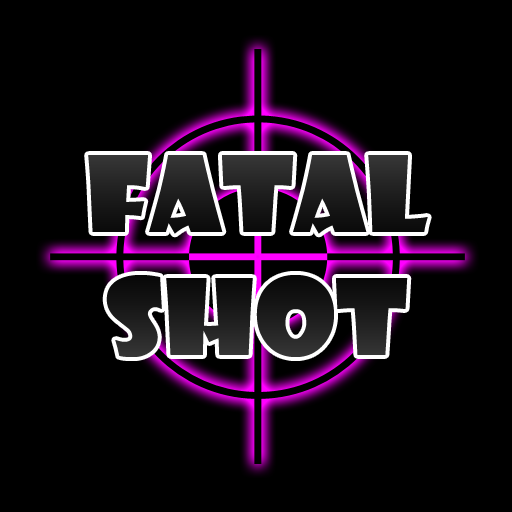
<style>
.page{position:relative;width:512px;height:512px;background:#000000}
.page>*{position:absolute;margin:0}
.t1{font:102px "ShowcardGothic-Reg";color:#1c1c1c;scale:1.14 1}
</style>
<div class="page">
<p class="t1" style="left:88px;top:155px;width:340px;height:202px;text-align:center">FATAL<br>SHOT</p>
</div>
